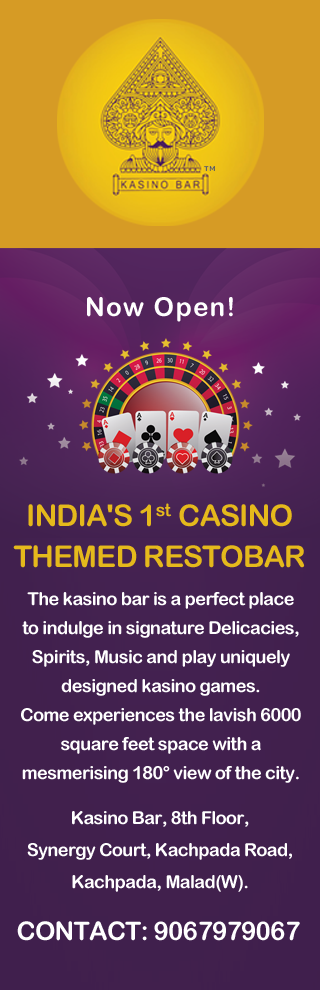
<style>
.page{position:relative;width:320px;height:990px}
.page>*{position:absolute;margin:0}
.t1{font:26px "ArialRoundedMTBold";letter-spacing:0.05em;color:#ffffff}
.t2{font:30px/41px "ArialRoundedMTBold";letter-spacing:-0.03em;color:#e5b91c}
.t3{font:18px/29.1px "ArialRoundedMTBold";letter-spacing:-0.03em;color:#ffffff}
.t4{font:18px/32.1px "ArialRoundedMTBold";letter-spacing:-0.03em;color:#ffffff}
.t5{font:25.9px "ArialRoundedMTBold";letter-spacing:-0.03em;color:#ffffff}
</style>
<div class="page">
<p class="t1" style="left:87px;top:297px;width:146px;height:25px">Now Open!</p>
<p class="t2" style="left:13px;top:503px;width:292px;height:65px;text-align:center">INDIA'S 1st  CASINO THEMED RESTOBAR</p>
<p class="t3" style="left:21px;top:592px;width:280px;height:191px;text-align:center">The kasino bar is a perfect place <br>to indulge in signature Delicacies, <br>Spirits, Music and play uniquely <br>designed kasino games. <br>Come experiences the lavish 6000 square feet space with a mesmerising 180° view of the city.</p>
<p class="t4" style="left:27px;top:811px;width:265px;height:81px;text-align:center">Kasino Bar, 8th Floor, <br>Synergy Court, Kachpada Road, <br>Kachpada, Malad(W).</p>
<p class="t5" style="left:17px;top:921px;width:283px;height:20px">CONTACT: 9067979067</p>
</div>
